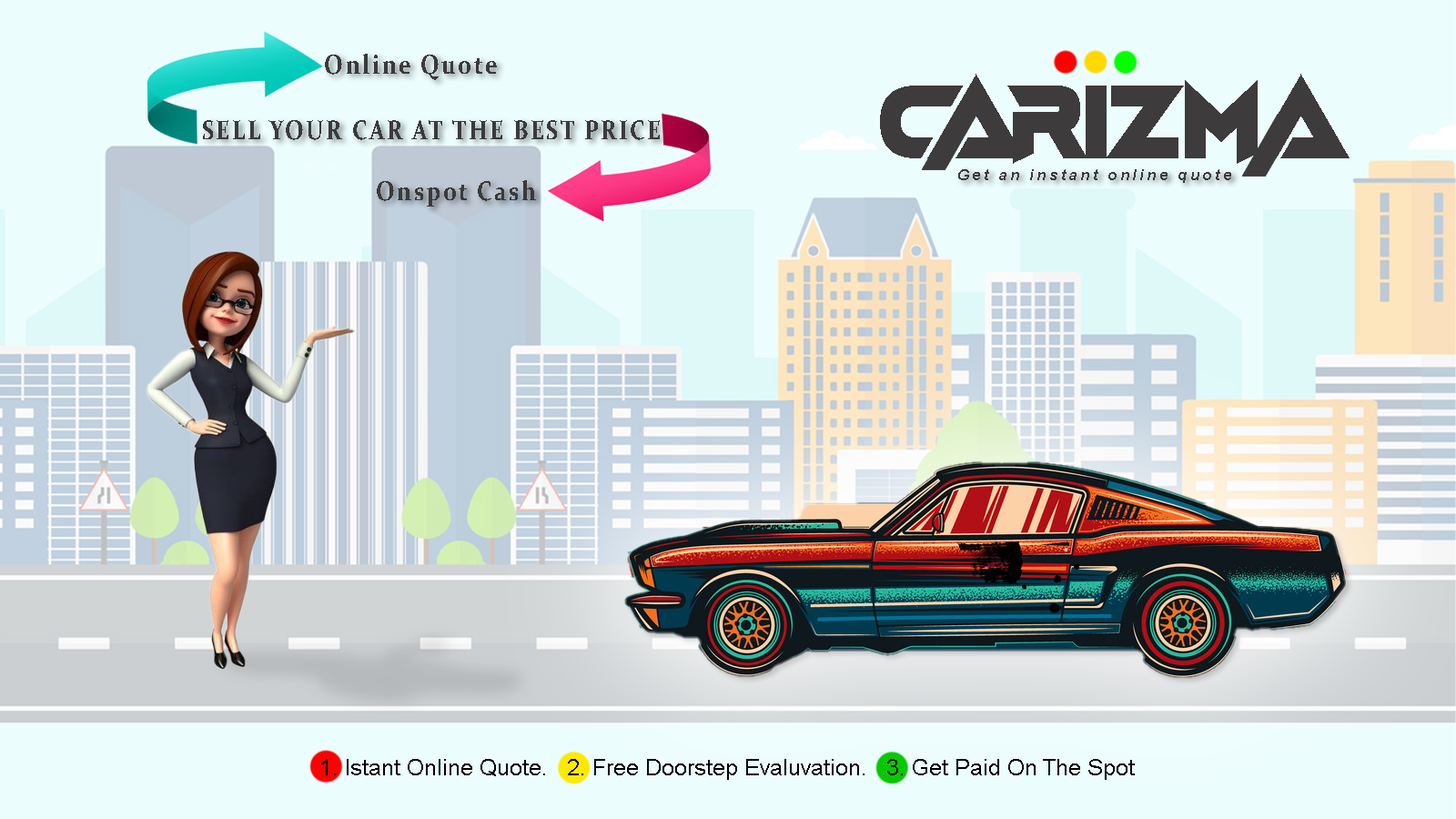
<style>
.page{position:relative;width:1456px;height:819px;background:#ecfdfd}
.page>*{position:absolute;margin:0}
.t1{font:27.3px "Constantia-Bold";letter-spacing:0.1em;color:#3b3a3a;scale:0.83 1}
.t2{font:106.7px "FastHand";color:#3d3b3b}
.t3{font:15.2px "Arial-BoldItalicMT";letter-spacing:0.2em;color:#3d3b3b}
.t4{font:22.7px "ArialMT";color:#010101}
</style>
<div class="page">
<p class="t1" style="left:325px;top:54px;width:172px;height:26px">Online Quote</p>
<p class="t2" style="left:880px;top:74px;width:470px;height:90px">CARIZMA</p>
<p class="t1" style="left:203px;top:120px;width:457px;height:20px">SELL YOUR CAR AT THE BEST PRICE</p>
<p class="t3" style="left:958px;top:169px;width:273px;height:14px">Get an instant online quote</p>
<p class="t1" style="left:377px;top:180px;width:159px;height:27px">Onspot Cash</p>
<p class="t4" style="left:321px;top:759px;width:814px;height:21px">1. Istant Online Quote.   2. Free Doorstep Evaluvation.   3. Get Paid On The Spot</p>
</div>
